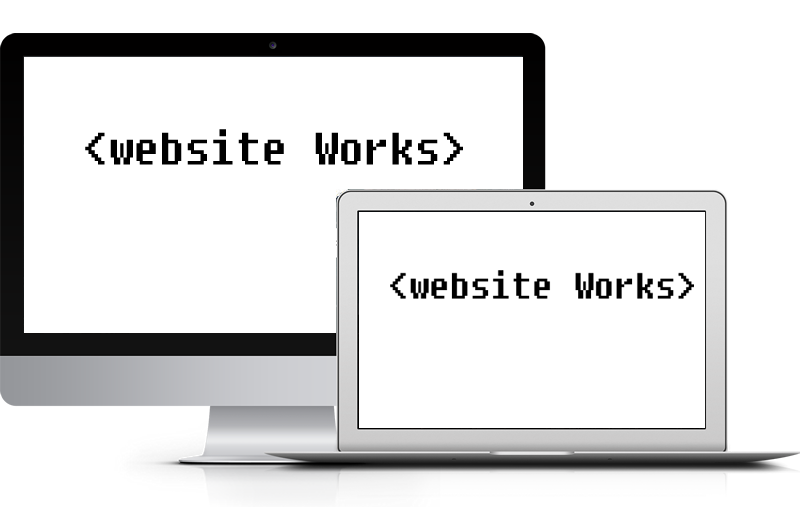
<style>
.page{position:relative;width:800px;height:507px;background:#ffffff}
.page>*{position:absolute;margin:0}
.t1{font:45.3px "Fixedsys";color:#000000;scale:0.91 1}
</style>
<div class="page">
<p class="t1" style="left:85px;top:129px;width:378px;height:36px">&lt;website Works&gt;</p>
</div>
